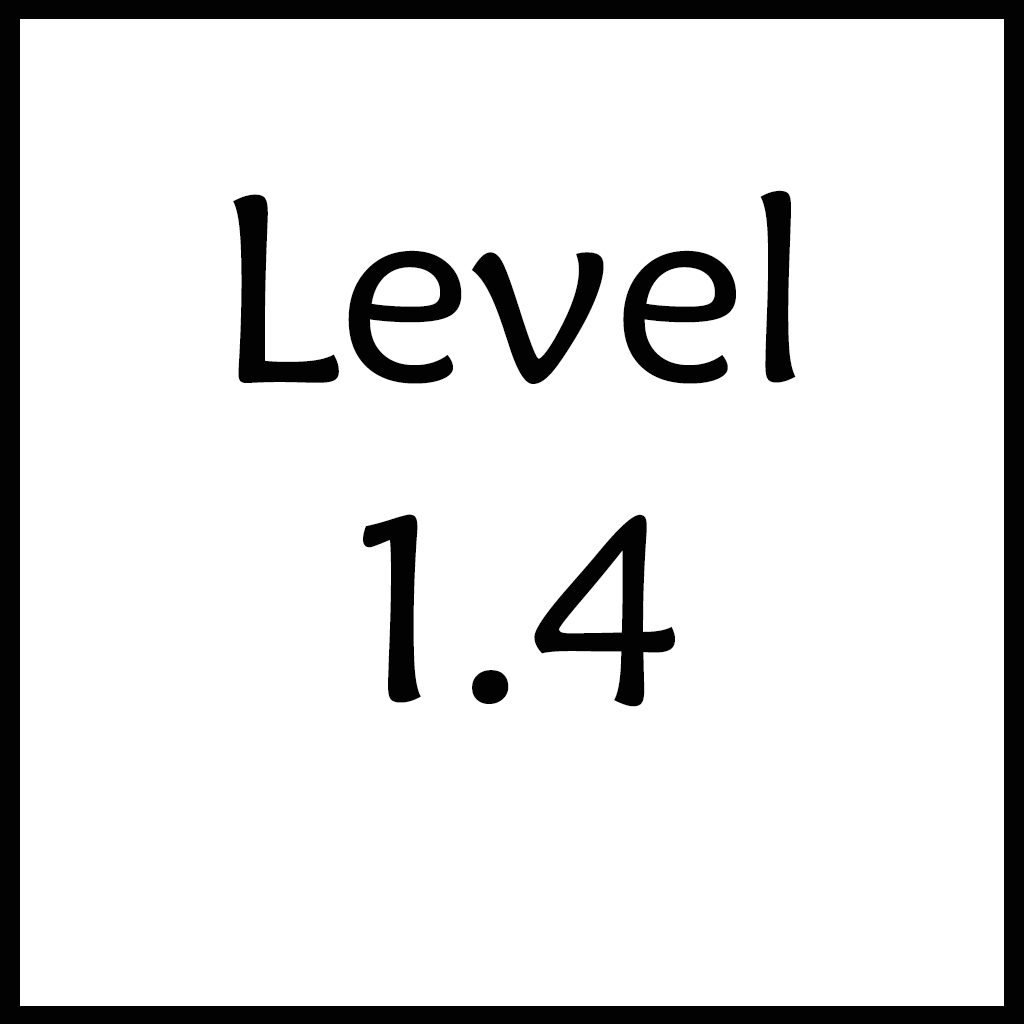
<style>
.page{position:relative;width:1024px;height:1024px;background:#ffffff}
.page>*{position:absolute;margin:0}
.t1{font:266.7px "MaiandraGD-Regular";color:#020202}
</style>
<div class="page">
<p class="t1" style="left:233px;top:190px;width:563px;height:517px;text-align:center">Level <br>1.4</p>
</div>
